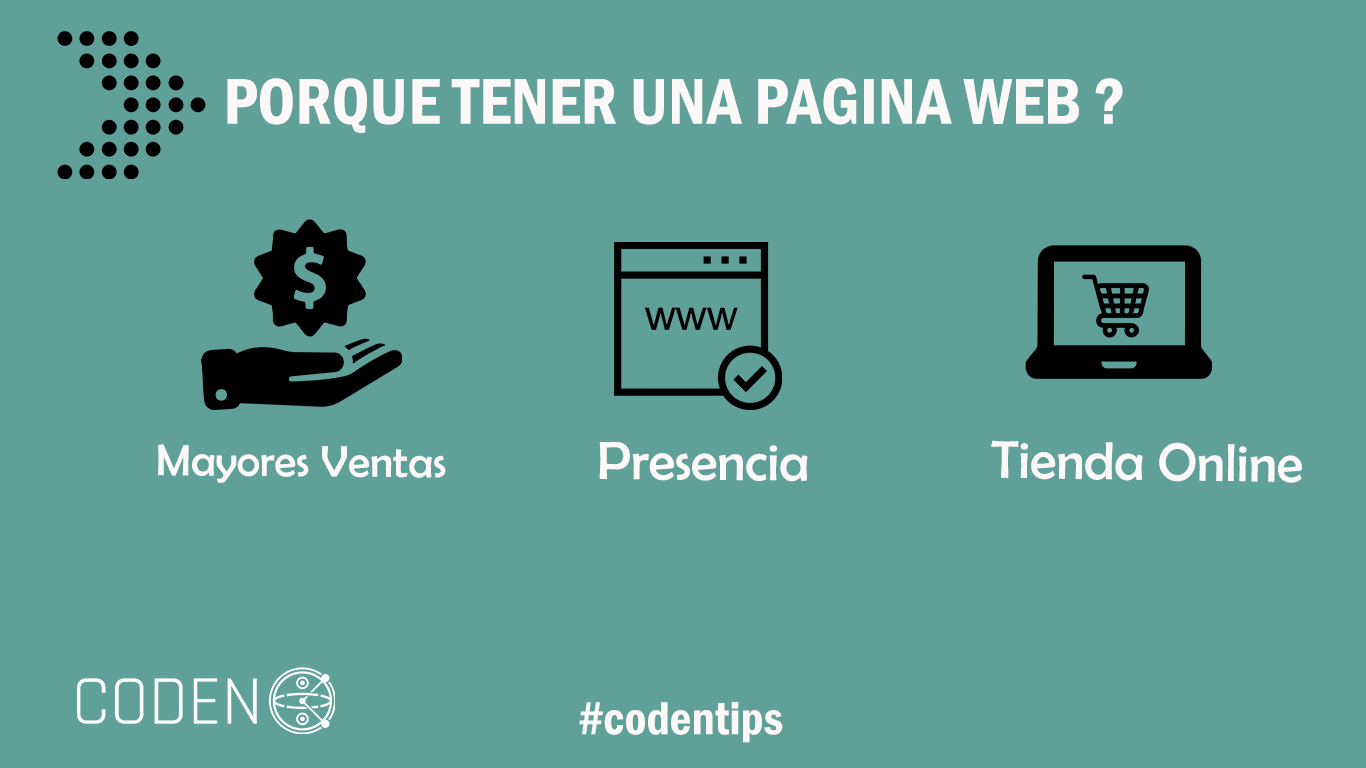
<style>
.page{position:relative;width:1366px;height:768px;background:#5fa199}
.page>*{position:absolute;margin:0}
.t1{font:67px "FranklinGothic-DemiCond";color:#fcf8f8}
.t2{font:44.6px "BerlinSansFB-Reg";color:#fcf8f8}
.t3{font:54.1px "BerlinSansFB-Reg";color:#fcf8f8}
.t4{font:53.9px "BerlinSansFB-Reg";color:#fcf8f8}
.t5{font:48px "FranklinGothic-DemiCond";color:#fcf8f8}
</style>
<div class="page">
<p class="t1" style="left:227px;top:78px;width:896px;height:55px">PORQUE TENER UNA PAGINA WEB ?</p>
<p class="t2" style="left:158px;top:444px;width:288px;height:39px">Mayores Ventas</p>
<p class="t3" style="left:599px;top:442px;width:209px;height:40px">Presencia</p>
<p class="t4" style="left:991px;top:440px;width:311px;height:43px;rotate:1deg">Tienda Online</p>
<p class="t5" style="left:579px;top:702px;width:204px;height:41px">#codentips</p>
</div>
